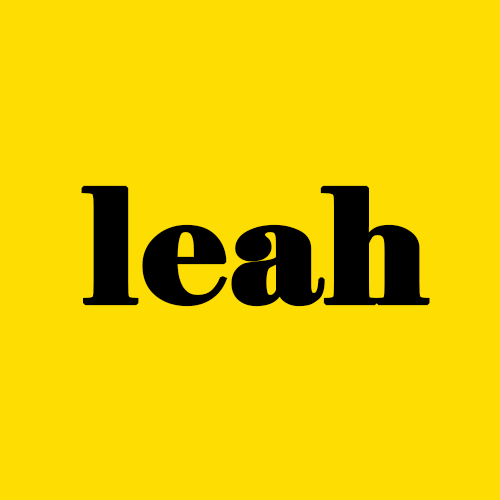
<style>
.page{position:relative;width:500px;height:500px;background:#fedd02}
.page>*{position:absolute;margin:0}
.t1{font:158px "Elephant-Regular";color:#000000;font-weight:bold}
</style>
<div class="page">
<p class="t1" style="left:81px;top:185px;width:349px;height:122px">leah</p>
</div>
